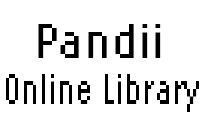
<style>
.page{position:relative;width:202px;height:125px;background:#ffffff}
.page>*{position:absolute;margin:0}
.t1{font:51.1px "LoRes12OT-NarrowRegular";color:#000000;scale:1.06 1}
.t2{font:45.2px "LoRes12OT-NarrowRegular";color:#000000;scale:0.8 1}
</style>
<div class="page">
<p class="t1" style="left:38px;top:24px;width:123px;height:34px">Pandii</p>
<p class="t2" style="left:6px;top:74px;width:193px;height:38px">Online Library</p>
</div>
